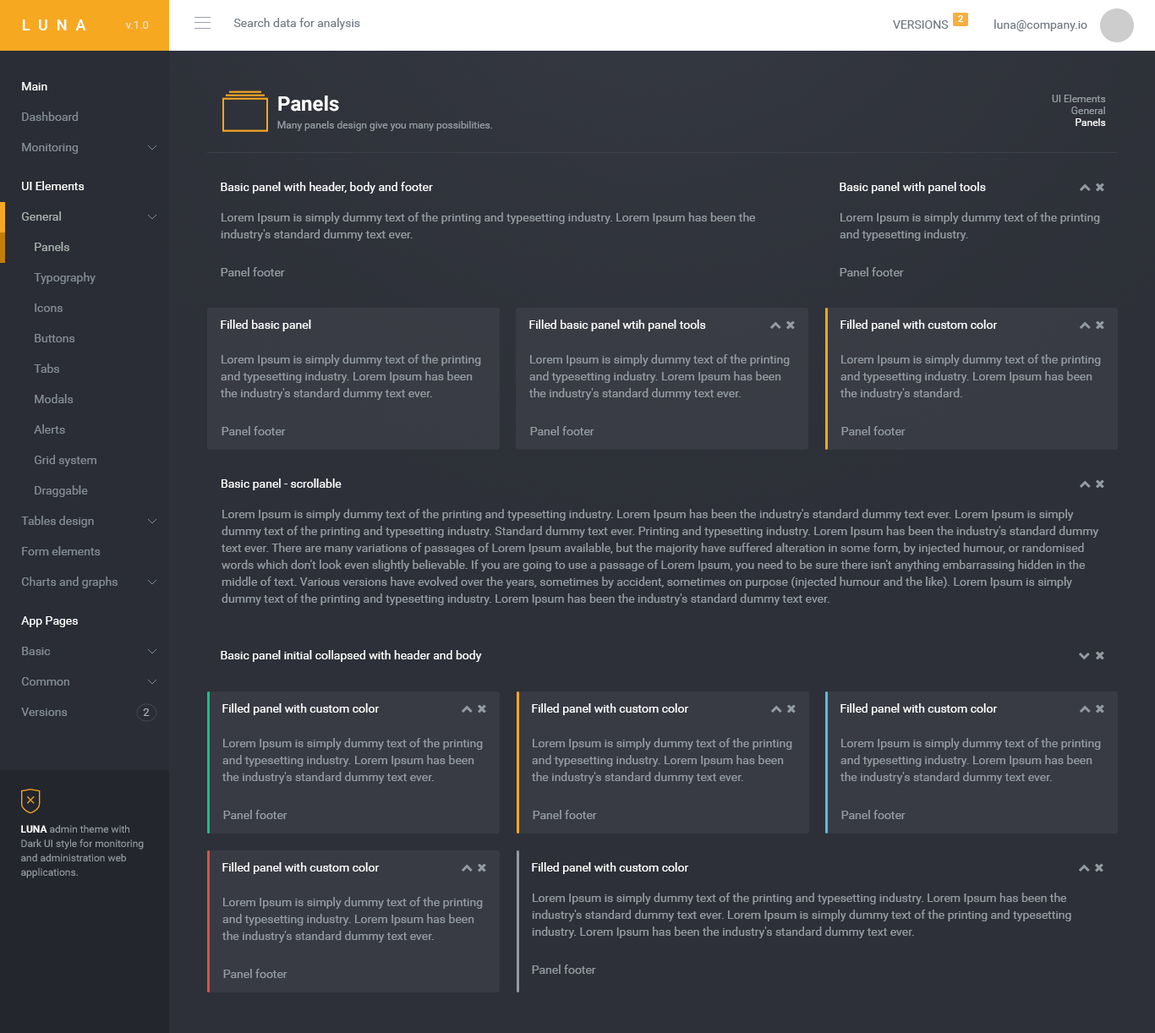
<style>
.page{position:relative;width:1155px;height:1033px;background:#2d3038}
.page>*{position:absolute;margin:0}
.t1{font:11.8px "Roboto-Regular";color:#6f7780}
.t2{font:9.3px "Roboto-Bold";color:#ffffff}
.t3{font:15.2px "Roboto-Medium";letter-spacing:0.55em;color:#ffffff}
.t4{font:11px "Roboto-Regular";color:#fbdfbc}
.t5{font:11.8px "Roboto-Regular";color:#ffffff}
.t6{font:20.3px "Roboto-Bold";color:#ffffff}
.t7{font:10.1px/11.8px "Roboto-Regular";color:#949ba2}
.t8{font:10.1px/11.8px "Roboto-Regular";color:#ffffff}
.t9{font:11.8px "Roboto-Regular";color:#848c94}
.t10{font:10.1px "Roboto-Regular";color:#949ba2}
.t11{font:11.8px "Roboto-Regular";color:#a9b2b0}
.t12{font:11.8px/16.9px "Roboto-Regular";color:#949ba2}
.t13{font:11.8px "Roboto-Regular";color:#949ba2}
.t14{font:11px "Roboto-Regular";color:#aaacb5}
.t15{font:10.1px/14.4px "Roboto-Regular";color:#949ba2}
.t16{font:10.1px/14.4px "Roboto-Bold";color:#ffffff}
</style>
<div class="page">
<p class="t1" style="left:233px;top:18px;width:127px;height:12px">Search data for analysis</p>
<p class="t2" style="left:958px;top:15px;width:5px;height:7px">2</p>
<p class="t3" style="left:22px;top:19px;width:64px;height:11px">LUNA</p>
<p class="t4" style="left:125px;top:21px;width:24px;height:8px">v.1.0</p>
<p class="t1" style="left:893px;top:20px;width:55px;height:9px">VERSIONS</p>
<p class="t1" style="left:994px;top:19px;width:93px;height:12px">luna@company.io</p>
<p class="t5" style="left:22px;top:82px;width:25px;height:8px">Main</p>
<p class="t6" style="left:278px;top:96px;width:61px;height:16px">Panels</p>
<p class="t7" style="left:1051px;top:95px;width:55px;height:31px;text-align:right">UI Elements<br>General<br><span class="t8">Panels</span></p>
<p class="t9" style="left:22px;top:112px;width:56px;height:9px">Dashboard</p>
<p class="t10" style="left:277px;top:121px;width:216px;height:10px">Many panels design give you many possibilities.</p>
<p class="t9" style="left:22px;top:143px;width:56px;height:11px">Monitoring</p>
<p class="t5" style="left:22px;top:181px;width:63px;height:9px">UI Elements</p>
<p class="t5" style="left:221px;top:182px;width:212px;height:12px">Basic panel with header, body and footer</p>
<p class="t5" style="left:839px;top:182px;width:146px;height:12px">Basic panel with panel tools</p>
<p class="t11" style="left:22px;top:211px;width:39px;height:10px">General</p>
<p class="t12" style="left:221px;top:212px;width:534px;height:29px">Lorem Ipsum is simply dummy text of the printing and typesetting industry. Lorem Ipsum has been the industry's standard dummy text ever.</p>
<p class="t12" style="left:839px;top:212px;width:261px;height:29px">Lorem Ipsum is simply dummy text of the printing and typesetting industry.</p>
<p class="t11" style="left:35px;top:242px;width:34px;height:9px">Panels</p>
<p class="t13" style="left:221px;top:267px;width:64px;height:9px">Panel footer</p>
<p class="t13" style="left:839px;top:267px;width:65px;height:9px">Panel footer</p>
<p class="t9" style="left:34px;top:272px;width:62px;height:12px">Typography</p>
<p class="t9" style="left:35px;top:303px;width:28px;height:9px">Icons</p>
<p class="t5" style="left:221px;top:319px;width:90px;height:12px">Filled basic panel</p>
<p class="t5" style="left:529px;top:319px;width:177px;height:12px">Filled basic panel wtih panel tools</p>
<p class="t5" style="left:840px;top:319px;width:157px;height:12px">Filled panel with custom color</p>
<p class="t9" style="left:35px;top:334px;width:40px;height:8px">Buttons</p>
<p class="t9" style="left:34px;top:363px;width:25px;height:10px">Tabs</p>
<p class="t12" style="left:220px;top:354px;width:261px;height:46px">Lorem Ipsum is simply dummy text of the printing and typesetting industry. Lorem Ipsum has been the industry's standard dummy text ever.</p>
<p class="t12" style="left:528px;top:354px;width:261px;height:46px">Lorem Ipsum is simply dummy text of the printing and typesetting industry. Lorem Ipsum has been the industry's standard dummy text ever.</p>
<p class="t12" style="left:839px;top:354px;width:261px;height:46px">Lorem Ipsum is simply dummy text of the printing and typesetting industry. Lorem Ipsum has been the industry's standard.</p>
<p class="t9" style="left:35px;top:394px;width:39px;height:9px">Modals</p>
<p class="t9" style="left:34px;top:424px;width:31px;height:10px">Alerts</p>
<p class="t13" style="left:221px;top:426px;width:65px;height:9px">Panel footer</p>
<p class="t13" style="left:530px;top:426px;width:64px;height:9px">Panel footer</p>
<p class="t13" style="left:841px;top:426px;width:64px;height:9px">Panel footer</p>
<p class="t9" style="left:35px;top:455px;width:61px;height:12px">Grid system</p>
<p class="t9" style="left:35px;top:485px;width:53px;height:12px">Draggable</p>
<p class="t5" style="left:221px;top:478px;width:120px;height:12px">Basic panel - scrollable</p>
<p class="t12" style="left:221px;top:509px;width:878px;height:96px">Lorem Ipsum is simply dummy text of the printing and typesetting industry. Lorem Ipsum has been the industry's standard dummy text ever. Lorem Ipsum is simply dummy text of the printing and typesetting industry. Standard dummy text ever. Printing and typesetting industry. Lorem Ipsum has been the industry's standard dummy text ever. There are many variations of passages of Lorem Ipsum available, but the majority have suffered alteration in some form, by injected humour, or randomised words which don't look even slightly believable. If you are going to use a passage of Lorem Ipsum, you need to be sure there isn't anything embarrassing hidden in the middle of text. Various versions have evolved over the years, sometimes by accident, sometimes on purpose (injected humour and the like). Lorem Ipsum is simply dummy text of the printing and typesetting industry. Lorem Ipsum has been the industry's standard dummy text ever.</p>
<p class="t9" style="left:21px;top:516px;width:73px;height:11px">Tables design</p>
<p class="t9" style="left:22px;top:546px;width:79px;height:9px">Form elements</p>
<p class="t9" style="left:21px;top:576px;width:96px;height:12px">Charts and graphs</p>
<p class="t5" style="left:21px;top:616px;width:57px;height:11px">App Pages</p>
<p class="t9" style="left:22px;top:647px;width:29px;height:8px">Basic</p>
<p class="t5" style="left:221px;top:650px;width:261px;height:12px">Basic panel initial collapsed with header and body</p>
<p class="t9" style="left:21px;top:677px;width:48px;height:8px">Common</p>
<p class="t9" style="left:21px;top:707px;width:47px;height:9px">Versions</p>
<p class="t14" style="left:143px;top:708px;width:7px;height:8px">2</p>
<p class="t5" style="left:222px;top:703px;width:157px;height:12px">Filled panel with custom color</p>
<p class="t5" style="left:532px;top:703px;width:157px;height:12px">Filled panel with custom color</p>
<p class="t5" style="left:840px;top:703px;width:157px;height:12px">Filled panel with custom color</p>
<p class="t12" style="left:221px;top:738px;width:262px;height:45px">Lorem Ipsum is simply dummy text of the printing and typesetting industry. Lorem Ipsum has been the industry's standard dummy text ever.</p>
<p class="t12" style="left:531px;top:738px;width:261px;height:45px">Lorem Ipsum is simply dummy text of the printing and typesetting industry. Lorem Ipsum has been the industry's standard dummy text ever.</p>
<p class="t12" style="left:839px;top:738px;width:261px;height:45px">Lorem Ipsum is simply dummy text of the printing and typesetting industry. Lorem Ipsum has been the industry's standard dummy text ever.</p>
<p class="t13" style="left:223px;top:810px;width:64px;height:9px">Panel footer</p>
<p class="t13" style="left:532px;top:810px;width:65px;height:9px">Panel footer</p>
<p class="t13" style="left:841px;top:810px;width:64px;height:9px">Panel footer</p>
<p class="t15" style="left:21px;top:825px;width:123px;height:53px"><span class="t16">LUNA </span>admin theme with Dark UI style for monitoring and administration web applications.</p>
<p class="t5" style="left:222px;top:862px;width:157px;height:12px">Filled panel with custom color</p>
<p class="t5" style="left:532px;top:862px;width:157px;height:12px">Filled panel with custom color</p>
<p class="t12" style="left:532px;top:893px;width:539px;height:45px">Lorem Ipsum is simply dummy text of the printing and typesetting industry. Lorem Ipsum has been the industry's standard dummy text ever. Lorem Ipsum is simply dummy text of the printing and typesetting industry. Lorem Ipsum has been the industry's standard dummy text ever.</p>
<p class="t12" style="left:221px;top:897px;width:262px;height:45px">Lorem Ipsum is simply dummy text of the printing and typesetting industry. Lorem Ipsum has been the industry's standard dummy text ever.</p>
<p class="t13" style="left:532px;top:964px;width:64px;height:10px">Panel footer</p>
<p class="t13" style="left:223px;top:969px;width:64px;height:9px">Panel footer</p>
</div>
